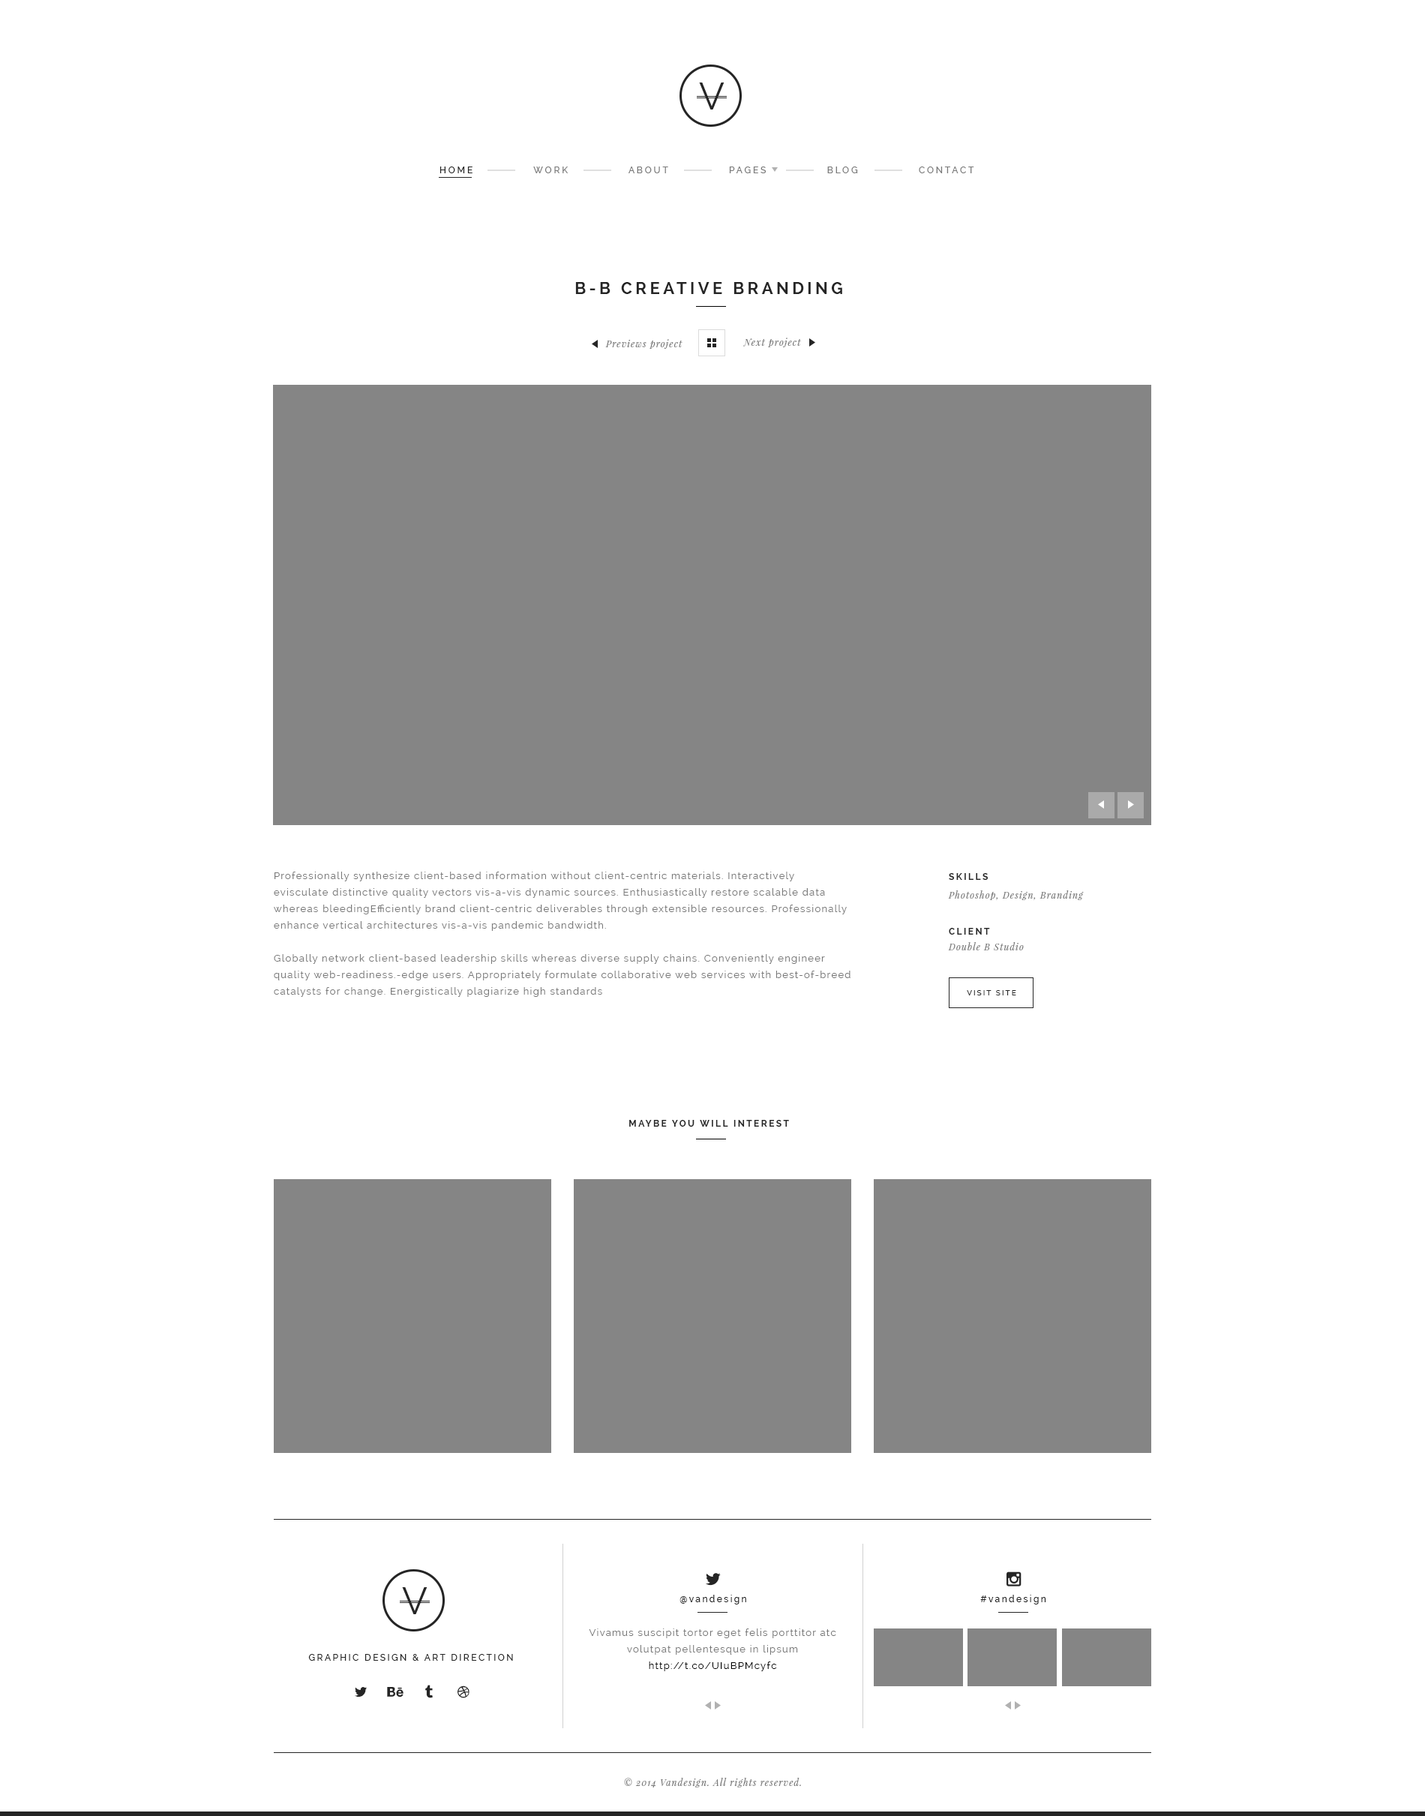
<style>
.page{position:relative;width:1425px;height:1816px;background:#ffffff}
.page>*{position:absolute;margin:0}
.t1{font:9px "Raleway-Medium";letter-spacing:0.2em;color:#7a7a7a;text-transform:uppercase;scale:1.04 1}
.t2{font:9px "Raleway-Medium";letter-spacing:0.2em;color:#252525;text-transform:uppercase;scale:1.04 1}
.t3{font:16.5px "Raleway-Bold";letter-spacing:0.2em;color:#252525}
.t4{font:9px "PlayfairDisplay-Italic";letter-spacing:0.1em;color:#7a7a7a}
.t5{font:9.8px/16.5px "Raleway";letter-spacing:0.1em;color:#7a7a7a}
.t6{font:9px "Raleway-Bold";letter-spacing:0.2em;color:#252525;text-transform:uppercase}
.t7{font:7.5px "Raleway-Medium";letter-spacing:0.2em;color:#252525}
.t8{font:9px "Raleway-Bold";letter-spacing:0.2em;color:#252525}
.t9{font:9px "Raleway-Medium";letter-spacing:0.2em;color:#252525}
.t10{font:9.8px/16.5px "Raleway";letter-spacing:0.1em;color:#000000}
.t11{font:9px "Raleway-Medium";letter-spacing:0.2em;color:#252525;text-transform:uppercase}
</style>
<div class="page">
<p class="t1" style="left:440px;top:166px;width:534px;height:7px"><span class="t2">HOME              </span>Work              About              Pages              Blog              Contact</p>
<p class="t3" style="left:575px;top:282px;width:267px;height:12px">B-B CREATIVE BRANDING</p>
<p class="t4" style="left:605px;top:339px;width:77px;height:10px">Previews project</p>
<p class="t4" style="left:743px;top:338px;width:58px;height:9px">Next project</p>
<p class="t5" style="left:274px;top:872px;width:576px;height:125px">Professionally synthesize client-based information without client-centric materials. Interactively evisculate distinctive quality vectors vis-a-vis dynamic sources. Enthusiastically restore scalable data whereas bleedingEfficiently brand client-centric deliverables through extensible resources. Professionally enhance vertical architectures vis-a-vis pandemic bandwidth.<br><br>Globally network client-based leadership skills whereas diverse supply chains. Conveniently engineer quality web-readiness.-edge users. Appropriately formulate collaborative web services with best-of-breed catalysts for change. Energistically plagiarize high standards</p>
<p class="t6" style="left:949px;top:873px;width:39px;height:7px">SKILLS</p>
<p class="t4" style="left:948px;top:890px;width:136px;height:10px">Photoshop, Design, Branding</p>
<p class="t6" style="left:949px;top:928px;width:41px;height:6px">CLIENT</p>
<p class="t4" style="left:948px;top:942px;width:76px;height:8px">Double B Studio</p>
<p class="t7" style="left:967px;top:990px;width:49px;height:5px">VISIT SITE</p>
<p class="t8" style="left:629px;top:1120px;width:160px;height:6px">MAYBE YOU WILL INTEREST</p>
<p class="t9" style="left:680px;top:1594px;width:66px;height:10px">@vandesign</p>
<p class="t9" style="left:980px;top:1594px;width:66px;height:10px">#vandesign</p>
<p class="t5" style="left:589px;top:1628px;width:247px;height:43px;text-align:center">Vivamus suscipit tortor eget felis porttitor atc <br>volutpat pellentesque in lipsum<br><span class="t10">http://t.co/UIuBPMcyfc</span></p>
<p class="t11" style="left:308px;top:1654px;width:205px;height:6px">Graphic Design &amp; Art Direction</p>
<p class="t4" style="left:624px;top:1778px;width:177px;height:9px">© 2014 Vandesign. All rights reserved.</p>
</div>
